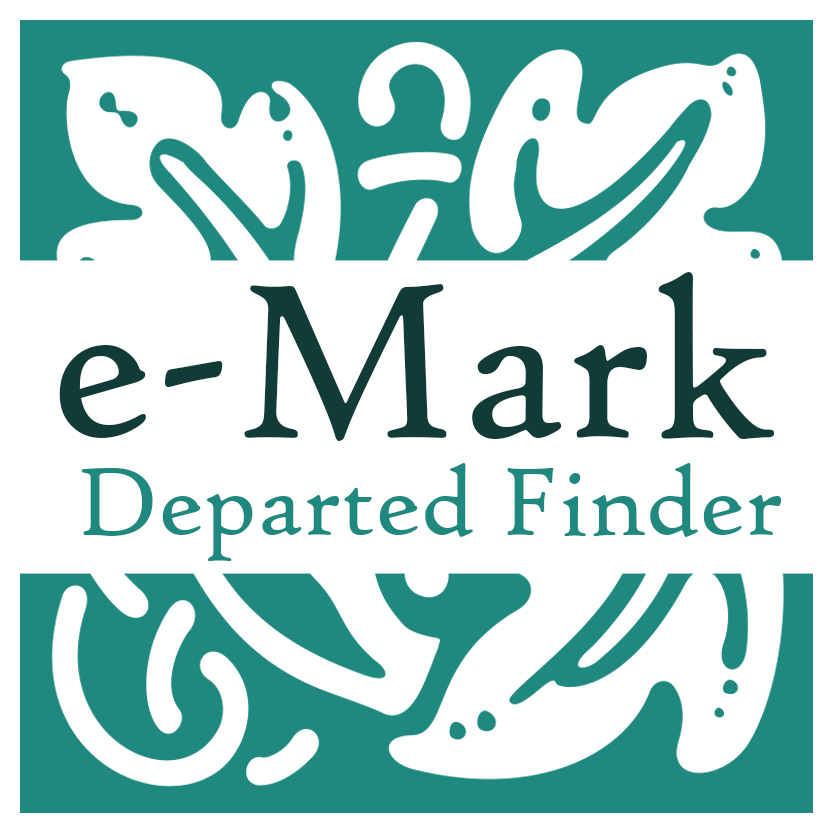
<style>
.page{position:relative;width:833px;height:833px;background:#ffffff}
.page>*{position:absolute;margin:0}
.t1{font:235.1px "HighTowerText-Reg";color:#103b37}
.t2{font:103px "HighTowerText-Reg";color:#1f897f}
</style>
<div class="page">
<p class="t1" style="left:59px;top:272px;width:716px;height:169px">e-Mark</p>
<p class="t2" style="left:81px;top:463px;width:700px;height:99px">Departed Finder</p>
</div>
